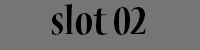
<style>
.page{position:relative;width:200px;height:50px;background:#757575}
.page>*{position:absolute;margin:0}
.t1{font:44px "NuevaStd-BoldCond";color:#000000}
</style>
<div class="page">
<p class="t1" style="left:51px;top:4px;width:95px;height:31px">slot 02</p>
</div>
